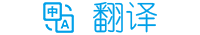
<style>
.page{position:relative;width:200px;height:35px;background:#ffffff}
.page>*{position:absolute;margin:0}
.t1{font:33.3px "YouYuan";color:#00a0e9}
</style>
<div class="page">
<p class="t1" style="left:93px;top:2px;width:64px;height:31px">翻译</p>
</div>
